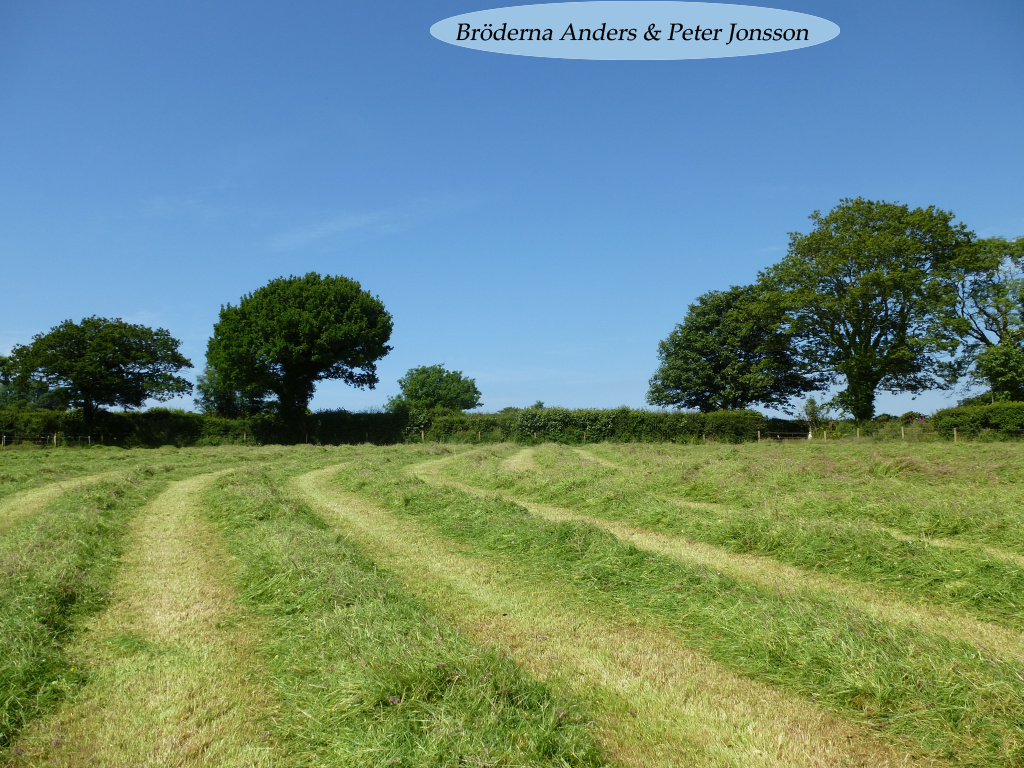
<style>
.page{position:relative;width:1024px;height:768px}
.page>*{position:absolute;margin:0}
.t1{font:23.8px "PalatinoLinotype-Roman";color:#000000;font-style:italic}
</style>
<div class="page">
<p class="t1" style="left:456px;top:22px;width:353px;height:23px">Bröderna Anders &amp; Peter Jonsson</p>
</div>
